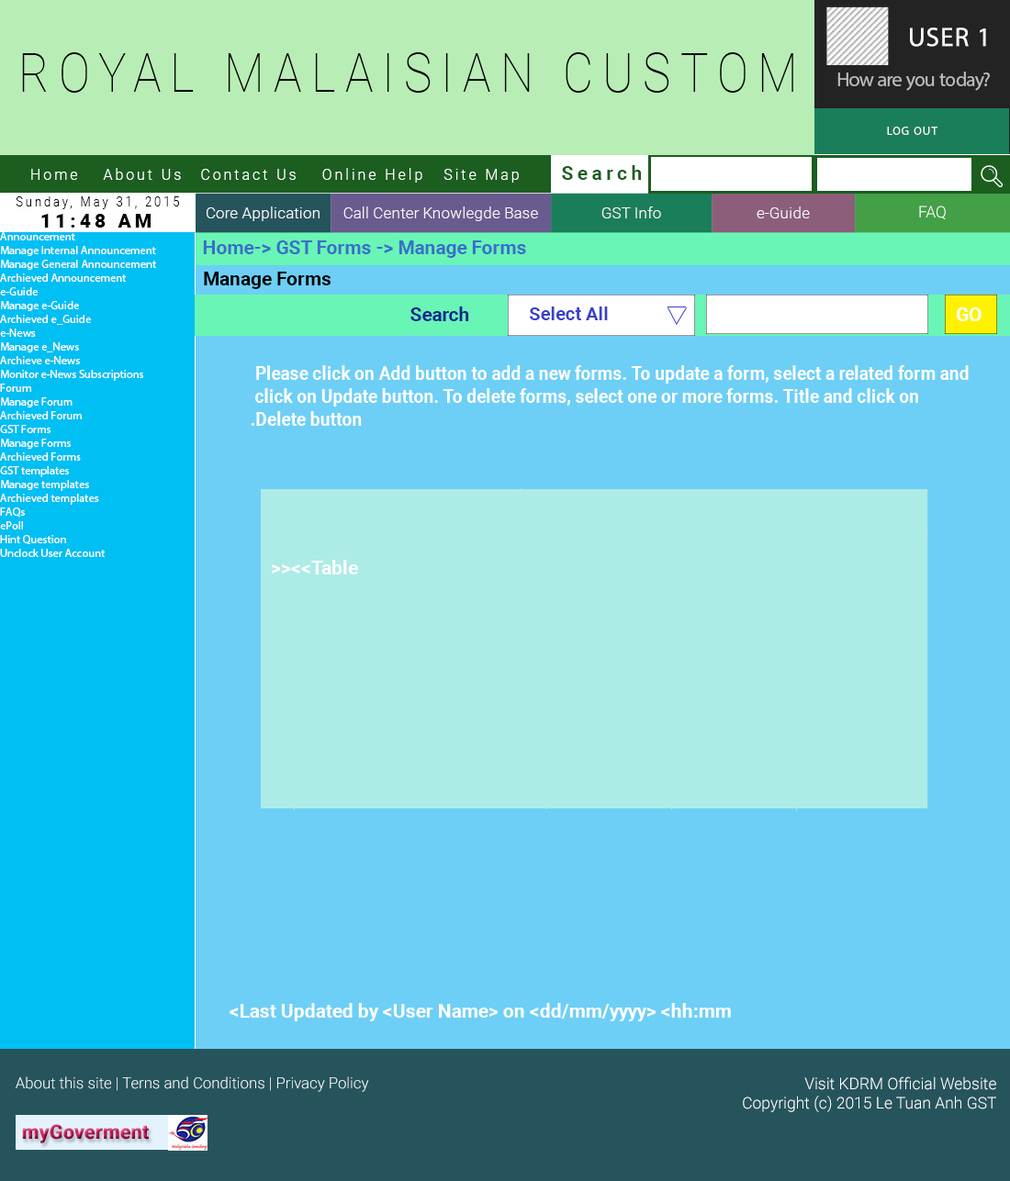
<style>
.page{position:relative;width:1010px;height:1181px;background:#6dcff6}
.page>*{position:absolute;margin:0}
.t1{font:26.6px "MyriadPro-Regular";letter-spacing:0.04em;color:#ffffff;text-transform:uppercase}
.t2{font:53.8px "Roboto-Thin";letter-spacing:0.2em;color:#000000;scale:0.87 1}
.t3{font:20px "MyriadPro-Regular";letter-spacing:-0.02em;color:#bcbcbc}
.t4{font:12px "MyriadPro-Regular";letter-spacing:0.06em;color:#ffffff;text-transform:uppercase}
.t5{font:15.3px "Roboto-Light";letter-spacing:0.2em;color:#ffffff;scale:0.94 1}
.t6{font:19.5px "Roboto-Bold";letter-spacing:0.2em;color:#1b5e20}
.t7{font:14px "Roboto-Light";letter-spacing:0.2em;color:#000000;scale:0.88 1}
.t8{font:16px "Roboto-Light";color:#ffffff}
.t9{font:19.1px "Roboto-Black";letter-spacing:0.2em;color:#000000}
.t10{font:11.5px "MyriadPro-Regular";color:#ffffff}
.t11{font:19.1px "Roboto-Bold";color:#3a6ec8}
.t12{font:19.1px "Roboto-Bold";color:#000000}
.t13{font:19.1px "Roboto-Bold";color:#0a298d}
.t14{font:18.6px "Roboto-Bold";color:#3a41c7}
.t15{font:19.1px "Roboto-Bold";color:#ffffff}
.t16{font:19.1px "Roboto-Bold";color:#ffffff;scale:0.92 1}
.t17{font:15.4px "Roboto-Light";color:#ffffff}
.t18{font:20px "Roboto-Black"}
</style>
<div class="page">
<p class="t1" style="left:910px;top:28px;width:76px;height:19px">USER 1</p>
<p class="t2" style="left:22px;top:52px;width:771px;height:41px">ROYAL MALAISIAN CUSTOM</p>
<p class="t3" style="left:837px;top:72px;width:152px;height:19px">How are you today?</p>
<p class="t4" style="left:887px;top:127px;width:50px;height:8px">LOG OUT</p>
<p class="t5" style="left:31px;top:168px;width:488px;height:15px">Home About Us Contact Us Online Help Site Map</p>
<p class="t6" style="left:562px;top:165px;width:80px;height:15px">Search</p>
<p class="t7" style="left:16px;top:196px;width:163px;height:13px">Sunday, May 31, 2015</p>
<p class="t8" style="left:206px;top:206px;width:113px;height:15px">Core Application</p>
<p class="t8" style="left:343px;top:206px;width:195px;height:15px;text-align:center">Call Center Knowlegde Base<br>Knowledge Base</p>
<p class="t8" style="left:601px;top:206px;width:60px;height:12px">GST Info</p>
<p class="t8" style="left:756px;top:206px;width:53px;height:12px">e-Guide</p>
<p class="t8" style="left:919px;top:206px;width:26px;height:14px">FAQ</p>
<p class="t9" style="left:41px;top:214px;width:110px;height:14px">11:48 AM</p>
<p class="t10" style="left:0px;top:232px;width:156px;height:325px;text-align:right">Announcement<br> Manage Internal Announcement<br> Manage General Announcement<br> Archieved Announcement<br>e-Guide<br> Manage e-Guide<br> Archieved e_Guide<br>e-News<br> Manage e_News<br> Archieve e-News<br> Monitor e-News Subscriptions<br>Forum<br> Manage Forum<br> Archieved Forum<br>GST Forms<br> Manage Forms<br> Archieved Forms<br>GST templates<br> Manage templates<br> Archieved templates<br>FAQs<br>ePoll<br>Hint Question<br>Unclock User Account</p>
<p class="t11" style="left:203px;top:240px;width:323px;height:18px">Home-&gt; GST Forms -&gt; Manage Forms</p>
<p class="t12" style="left:204px;top:272px;width:126px;height:17px">Manage Forms</p>
<p class="t13" style="left:410px;top:307px;width:59px;height:14px">Search</p>
<p class="t14" style="left:529px;top:307px;width:79px;height:13px">Select All</p>
<p class="t15" style="left:956px;top:307px;width:25px;height:14px">GO</p>
<p class="t16" style="left:251px;top:365px;width:717px;height:61px;text-align:right">Please click on Add button to add a new forms. To update a form, select a related form and <br>click on Update button. To delete forms, select one or more forms. Title and click on<br>Delete button.</p>
<p class="t15" style="left:272px;top:560px;width:86px;height:15px">Table&gt;&gt;&lt;&lt;</p>
<p class="t15" style="left:229px;top:1003px;width:502px;height:18px">Last Updated by &lt;User Name&gt; on &lt;dd/mm/yyyy&gt; &lt;hh:mm&gt;</p>
<p class="t17" style="left:16px;top:1077px;width:353px;height:15px">About this site | Terns and Conditions | Privacy Policy</p>
<p class="t8" style="left:742px;top:1077px;width:254px;height:35px;text-align:right">Visit KDRM Official Website<br>Copyright (c) 2015 Le Tuan Anh GST</p>
<p class="t18" style="left:22px;top:1124px;width:127px;height:20px">myGoverment</p>
</div>
